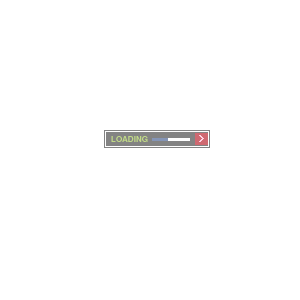
<style>
.page{position:relative;width:300px;height:300px;background:#ffffff}
.page>*{position:absolute;margin:0}
.t1{font:8px "Helios-Bold";color:#c1da87;text-transform:uppercase}
</style>
<div class="page">
<p class="t1" style="left:111px;top:136px;width:37px;height:6px">loading</p>
</div>
